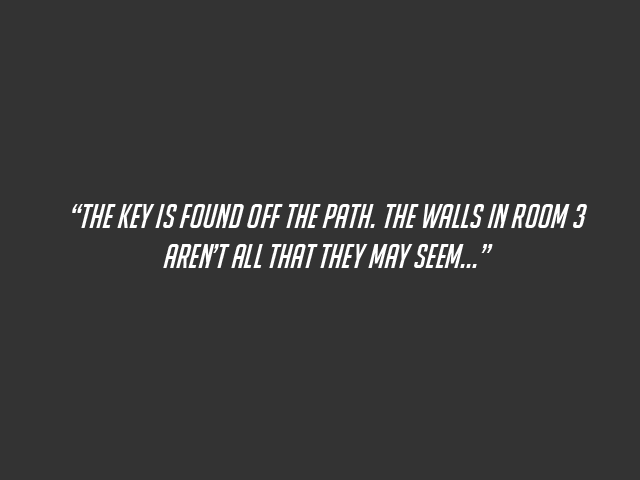
<style>
.page{position:relative;width:640px;height:480px;background:#333333}
.page>*{position:absolute;margin:0}
.t1{font:33.3px "BigNoodleTooOblique";color:#ffffff}
</style>
<div class="page">
<p class="t1" style="left:72px;top:204px;width:515px;height:64px;text-align:center">“The key is found off the path. The walls in room 3 aren’t all that they may seem...”</p>
</div>
